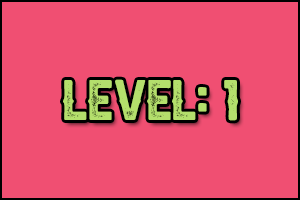
<style>
.page{position:relative;width:300px;height:200px;background:#f04f72}
.page>*{position:absolute;margin:0}
.t1{font:35px "AldivaroStampDemo-Stamp";color:#b4df6c}
</style>
<div class="page">
<p class="t1" style="left:63px;top:79px;width:175px;height:42px">Level: 1</p>
</div>
